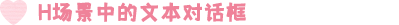
<style>
.page{position:relative;width:399px;height:25px;background:#ffffff}
.page>*{position:absolute;margin:0}
.t1{font:21.2px "shetumodengxiaofangti";color:#ef8299;font-weight:bold}
</style>
<div class="page">
<p class="t1" style="left:38px;top:2px;width:208px;height:20px">H场景中的文本对话框</p>
</div>
